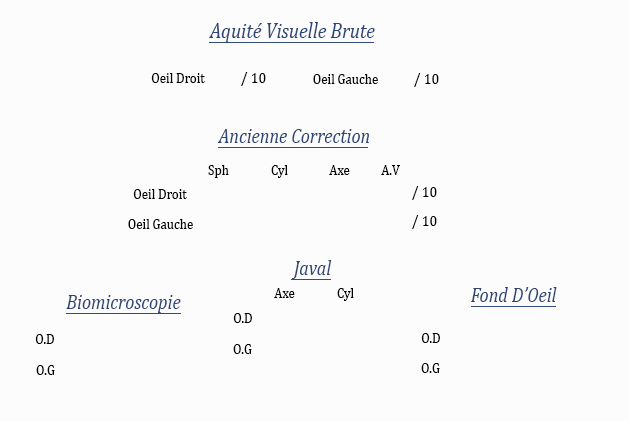
<style>
.page{position:relative;width:630px;height:421px;background:#fcfcfc}
.page>*{position:absolute;margin:0}
.t1{font:21.7px "Cambria-Italic";color:#2c4476;scale:0.88 1}
.t2{font:14.8px "Cambria";color:#030303;scale:0.88 1}
.t3{font:16px "Cambria";color:#030303;scale:0.88 1}
.t4{font:20.5px "Cambria-Italic";color:#2c4476;scale:0.88 1}
.t5{font:14.8px "Cambria";color:#000000;scale:0.88 1}
</style>
<div class="page">
<p class="t1" style="left:209px;top:22px;width:166px;height:21px">Aquité Visuelle Brute</p>
<p class="t2" style="left:151px;top:73px;width:54px;height:10px">Oeil Droit</p>
<p class="t3" style="left:241px;top:72px;width:25px;height:14px">10 /</p>
<p class="t2" style="left:313px;top:74px;width:65px;height:10px">Oeil Gauche</p>
<p class="t3" style="left:414px;top:73px;width:25px;height:14px">10 /</p>
<p class="t4" style="left:217px;top:129px;width:152px;height:14px">Ancienne Correction</p>
<p class="t5" style="left:208px;top:165px;width:21px;height:13px">Sph</p>
<p class="t5" style="left:271px;top:165px;width:17px;height:13px">Cyl</p>
<p class="t5" style="left:329px;top:165px;width:21px;height:10px">Axe</p>
<p class="t5" style="left:381px;top:165px;width:19px;height:10px">A.V</p>
<p class="t2" style="left:133px;top:189px;width:54px;height:10px">Oeil Droit</p>
<p class="t3" style="left:412px;top:186px;width:25px;height:14px">10 /</p>
<p class="t2" style="left:128px;top:219px;width:65px;height:10px">Oeil Gauche</p>
<p class="t3" style="left:412px;top:215px;width:25px;height:14px">10 /</p>
<p class="t4" style="left:292px;top:260px;width:40px;height:19px">Javal</p>
<p class="t2" style="left:274px;top:288px;width:21px;height:10px">Axe</p>
<p class="t2" style="left:337px;top:288px;width:17px;height:13px">Cyl</p>
<p class="t4" style="left:471px;top:287px;width:86px;height:15px">Fond D’Oeil</p>
<p class="t4" style="left:66px;top:295px;width:115px;height:18px">Biomicroscopie</p>
<p class="t2" style="left:233px;top:313px;width:19px;height:10px">O.D</p>
<p class="t2" style="left:35px;top:334px;width:19px;height:10px">O.D</p>
<p class="t2" style="left:421px;top:333px;width:19px;height:10px">O.D</p>
<p class="t2" style="left:233px;top:344px;width:19px;height:10px">O.G</p>
<p class="t2" style="left:36px;top:365px;width:19px;height:10px">O.G</p>
<p class="t2" style="left:421px;top:363px;width:19px;height:10px">O.G</p>
</div>
